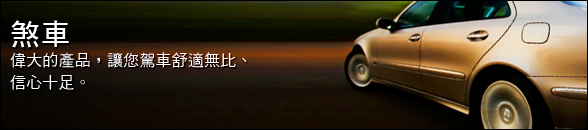
<style>
.page{position:relative;width:588px;height:130px}
.page>*{position:absolute;margin:0}
.t1{font:16px/22px "DFHei-Md-HKP-BF";letter-spacing:0.01em;color:#ffffff}
.t2{font:30px/22px "DFHei-Bd-HKP-BF";letter-spacing:0.01em;color:#fefefe}
</style>
<div class="page">
<p class="t1" style="left:10px;top:20px;width:237px;height:70px"><span class="t2">煞車<br></span>偉大的產品，讓您駕車舒適無比、<br>信心十足。</p>
</div>
